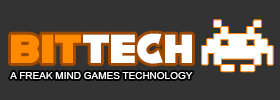
<style>
.page{position:relative;width:280px;height:100px;background:#333333}
.page>*{position:absolute;margin:0}
.t1{font:36px "NiseSegaSonic";color:#ffffff}
.t2{font:36px "NiseSegaSonic";color:#ff8a00}
.t3{font:10px "ArialMT";color:#ffffff}
</style>
<div class="page">
<p class="t1" style="left:11px;top:33px;width:181px;height:31px"><span class="t2">bit</span>Tech</p>
<p class="t3" style="left:10px;top:72px;width:183px;height:7px">A FREAK MIND GAMES TECHNOLOGY</p>
</div>
